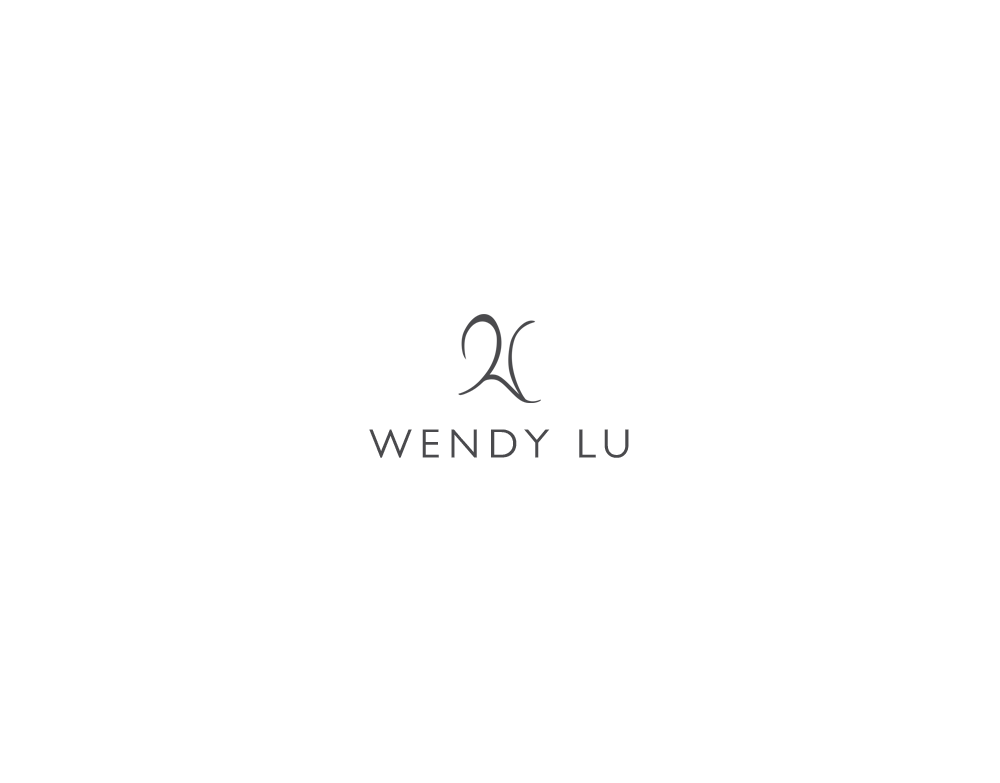
<style>
.page{position:relative;width:1000px;height:783px;background:#ffffff}
.page>*{position:absolute;margin:0}
.t1{font:39.9px "PetitaMedium";letter-spacing:0.2em;color:#4a4a4d}
</style>
<div class="page">
<p class="t1" style="left:369px;top:429px;width:260px;height:29px">WENDY LU</p>
</div>
